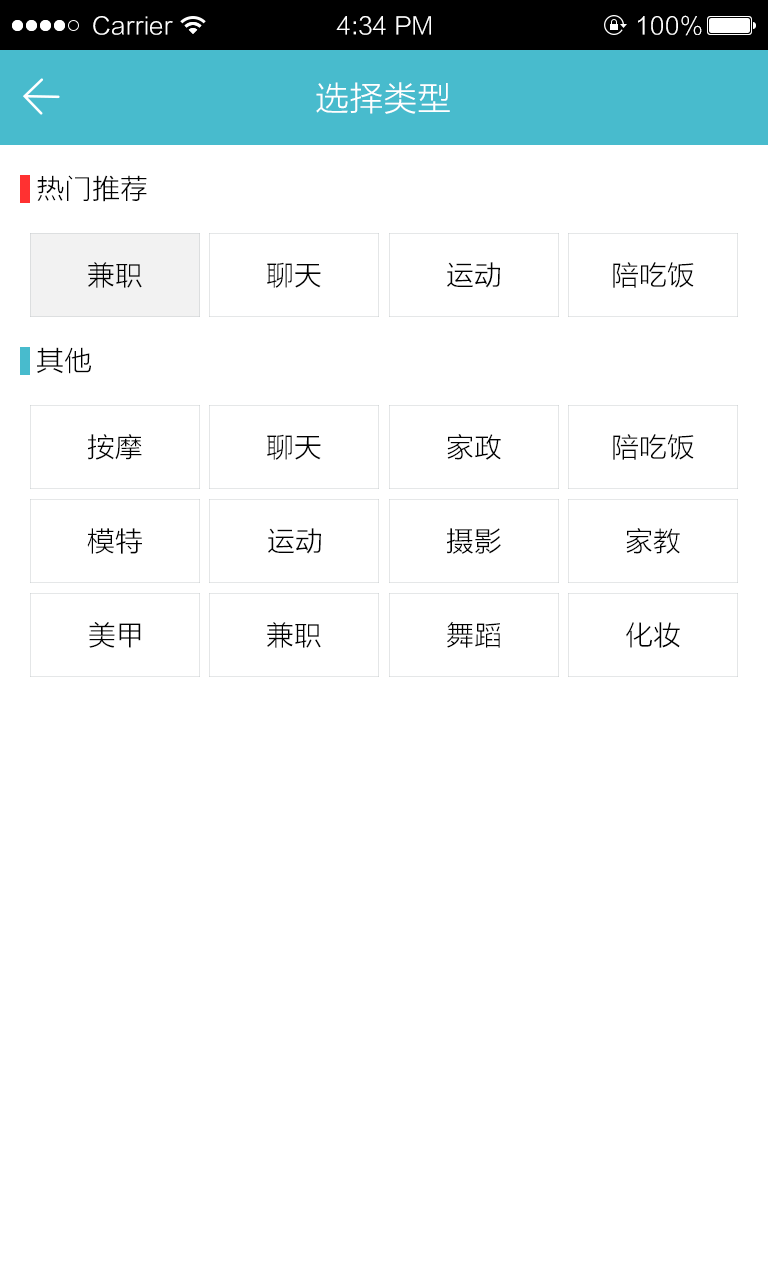
<style>
.page{position:relative;width:768px;height:1280px;background:#ffffff}
.page>*{position:absolute;margin:0}
.t1{font:24px "FZLTXHK";color:#ffffff}
.t2{font:34px "FZLTXHK";color:#ffffff}
.t3{font:28px "FZLTXHK";color:#000000}
.t4{font:28px "FZLTXHK";color:#010101}
</style>
<div class="page">
<p class="t1" style="left:93px;top:16px;width:80px;height:19px">Carrier</p>
<p class="t1" style="left:336px;top:16px;width:95px;height:19px">4:34 PM</p>
<p class="t1" style="left:638px;top:15px;width:64px;height:21px">100%</p>
<p class="t2" style="left:316px;top:82px;width:134px;height:32px">选择类型</p>
<p class="t3" style="left:37px;top:175px;width:110px;height:27px">热门推荐</p>
<p class="t4" style="left:88px;top:262px;width:54px;height:26px">兼职</p>
<p class="t4" style="left:267px;top:262px;width:54px;height:26px">聊天</p>
<p class="t4" style="left:447px;top:262px;width:53px;height:26px">运动</p>
<p class="t4" style="left:613px;top:262px;width:81px;height:26px">陪吃饭</p>
<p class="t3" style="left:37px;top:347px;width:54px;height:27px">其他</p>
<p class="t4" style="left:88px;top:434px;width:54px;height:26px">按摩</p>
<p class="t4" style="left:267px;top:434px;width:54px;height:26px">聊天</p>
<p class="t4" style="left:447px;top:434px;width:54px;height:26px">家政</p>
<p class="t4" style="left:613px;top:434px;width:81px;height:26px">陪吃饭</p>
<p class="t4" style="left:87px;top:528px;width:55px;height:26px">模特</p>
<p class="t4" style="left:268px;top:528px;width:53px;height:26px">运动</p>
<p class="t4" style="left:447px;top:528px;width:54px;height:26px">摄影</p>
<p class="t4" style="left:626px;top:528px;width:54px;height:26px">家教</p>
<p class="t4" style="left:89px;top:622px;width:52px;height:26px">美甲</p>
<p class="t4" style="left:267px;top:622px;width:54px;height:26px">兼职</p>
<p class="t4" style="left:447px;top:621px;width:53px;height:27px">舞蹈</p>
<p class="t4" style="left:626px;top:622px;width:54px;height:26px">化妆</p>
</div>
